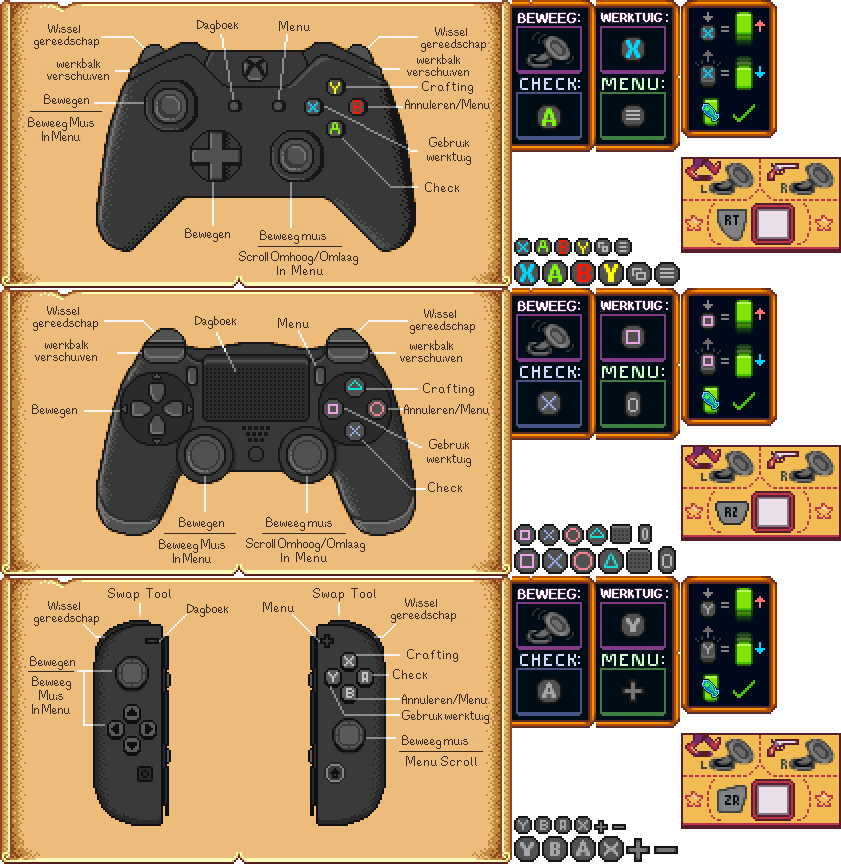
<style>
.page{position:relative;width:841px;height:864px;background:#edbb7a}
.page>*{position:absolute;margin:0}
.t1{font:14px "SVThin";color:#ffffff;font-variant:small-caps;font-weight:bold}
.t2{font:12px "SVThin";color:#ffffff;font-variant:small-caps;font-weight:bold}
.t3{font:13px/12px "SVThin";color:#34291b}
.t4{font:13px "SVThin";color:#34291b}
.t5{font:14px/12px "SVThin";color:#34291b}
.t6{font:14px "SVThin";color:#34291b}
.t7{font:14px/14px "SVThin";color:#34291b}
</style>
<div class="page">
<p class="t1" style="left:518px;top:13px;width:58px;height:10px">BEWEEG</p>
<p class="t2" style="left:601px;top:13px;width:61px;height:9px">WERKTUIG</p>
<p class="t3" style="left:34px;top:24px;width:65px;height:25px;text-align:center">Wissel  <br>gereedschap</p>
<p class="t4" style="left:197px;top:20px;width:41px;height:13px">Dagboek</p>
<p class="t3" style="left:421px;top:27px;width:65px;height:25px;text-align:center">Wissel  <br>gereedschap</p>
<p class="t5" style="left:407px;top:54px;width:62px;height:22px;text-align:center">werkbalk<br>verschuiven</p>
<p class="t5" style="left:47px;top:58px;width:62px;height:22px;text-align:center">werkbalk<br>verschuiven</p>
<p class="t6" style="left:44px;top:94px;width:45px;height:14px">Bewegen</p>
<p class="t6" style="left:405px;top:99px;width:85px;height:10px">Annuleren/Menu</p>
<p class="t7" style="left:28px;top:117px;width:66px;height:24px;text-align:center">Beweeg Muis<br>In Menu</p>
<p class="t7" style="left:427px;top:137px;width:44px;height:28px;text-align:center">Gebruik<br>werktuig</p>
<p class="t6" style="left:185px;top:228px;width:45px;height:14px">Bewegen</p>
<p class="t6" style="left:260px;top:230px;width:66px;height:14px">Beweeg muis</p>
<p class="t6" style="left:239px;top:251px;width:119px;height:14px">Scroll Omhoog/Omlaag</p>
<p class="t1" style="left:518px;top:301px;width:58px;height:10px">BEWEEG</p>
<p class="t2" style="left:601px;top:301px;width:61px;height:9px">WERKTUIG</p>
<p class="t3" style="left:33px;top:306px;width:65px;height:25px;text-align:center">Wissel  <br>gereedschap</p>
<p class="t4" style="left:195px;top:316px;width:41px;height:13px">Dagboek</p>
<p class="t3" style="left:410px;top:309px;width:65px;height:25px;text-align:center">Wissel  <br>gereedschap</p>
<p class="t5" style="left:35px;top:339px;width:62px;height:22px;text-align:center">werkbalk<br>verschuiven</p>
<p class="t5" style="left:400px;top:340px;width:62px;height:22px;text-align:center">werkbalk<br>verschuiven</p>
<p class="t6" style="left:32px;top:404px;width:45px;height:14px">Bewegen</p>
<p class="t6" style="left:404px;top:404px;width:85px;height:10px">Annuleren/Menu</p>
<p class="t7" style="left:427px;top:439px;width:44px;height:28px;text-align:center">Gebruik<br>werktuig</p>
<p class="t6" style="left:179px;top:517px;width:45px;height:14px">Bewegen</p>
<p class="t6" style="left:266px;top:517px;width:66px;height:14px">Beweeg muis</p>
<p class="t7" style="left:159px;top:539px;width:66px;height:24px;text-align:center">Beweeg Muis<br>In Menu</p>
<p class="t6" style="left:246px;top:538px;width:119px;height:14px">Scroll Omhoog/Omlaag</p>
<p class="t1" style="left:518px;top:589px;width:58px;height:10px">BEWEEG</p>
<p class="t2" style="left:601px;top:589px;width:61px;height:9px">WERKTUIG</p>
<p class="t3" style="left:34px;top:601px;width:65px;height:25px;text-align:center">Wissel  <br>gereedschap</p>
<p class="t4" style="left:187px;top:604px;width:41px;height:13px">Dagboek</p>
<p class="t3" style="left:391px;top:598px;width:65px;height:25px;text-align:center">Wissel  <br>gereedschap</p>
<p class="t6" style="left:30px;top:656px;width:45px;height:14px">Bewegen</p>
<p class="t7" style="left:32px;top:676px;width:39px;height:38px;text-align:center">Beweeg<br>Muis<br>In Menu</p>
<p class="t6" style="left:402px;top:694px;width:85px;height:10px">Annuleren/Menu</p>
<p class="t6" style="left:402px;top:710px;width:87px;height:14px">Gebruik werktuig</p>
<p class="t6" style="left:402px;top:735px;width:66px;height:14px">Beweeg muis</p>
</div>
